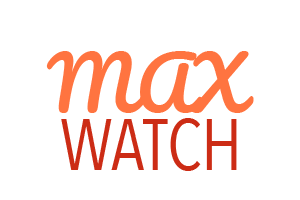
<style>
.page{position:relative;width:300px;height:200px;background:#ffffff}
.page>*{position:absolute;margin:0}
.t1{font:72px "Pacifico-Regular";color:#ff7440}
.t2{font:72px "AvenirNextCondensed-Regular";color:#cc2c15}
</style>
<div class="page">
<p class="t1" style="left:46px;top:51px;width:208px;height:62px">MAX</p>
<p class="t2" style="left:61px;top:118px;width:176px;height:53px">WATCH</p>
</div>
